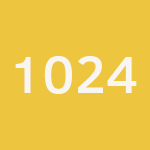
<style>
.page{position:relative;width:150px;height:150px;background:#edc53f}
.page>*{position:absolute;margin:0}
.t1{font:52.9px "ClearSans-Medium";color:#f9f6f2}
</style>
<div class="page">
<p class="t1" style="left:15px;top:56px;width:122px;height:38px">1024</p>
</div>
